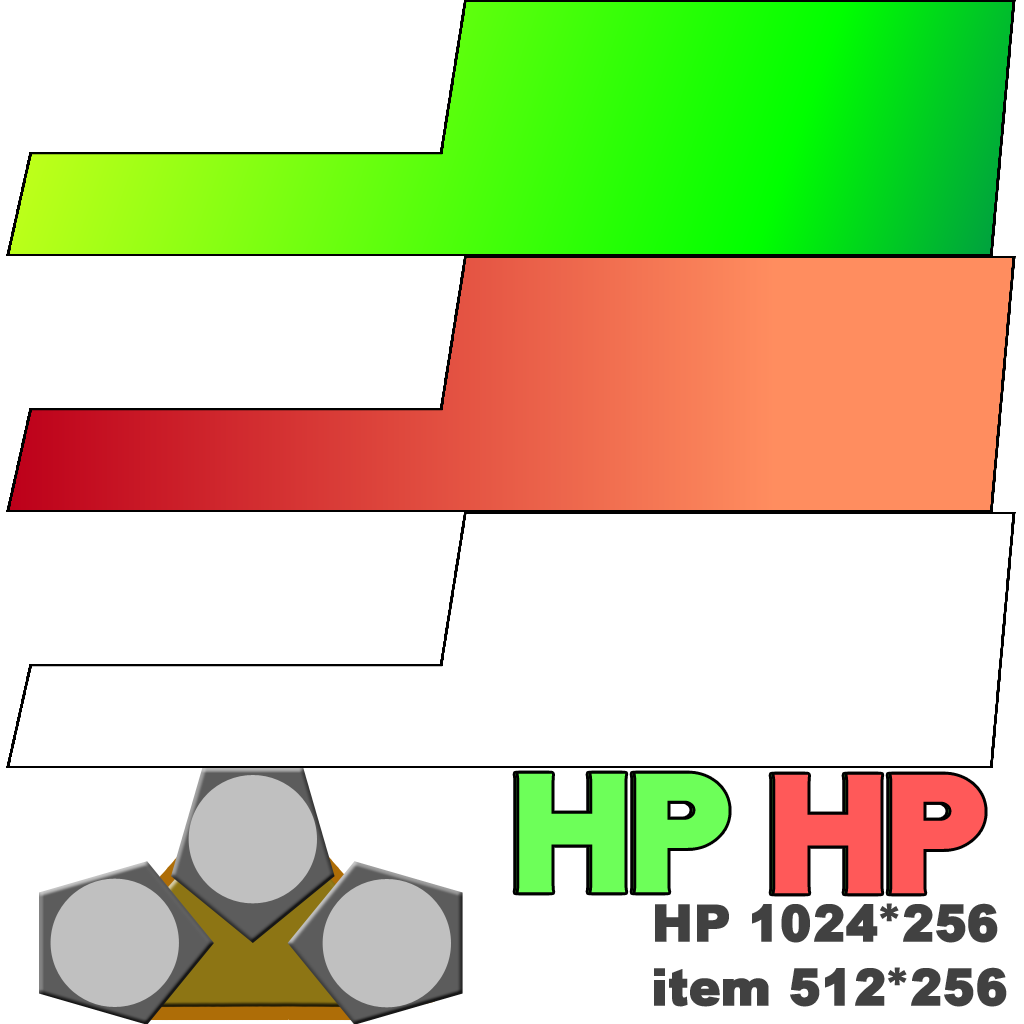
<style>
.page{position:relative;width:1024px;height:1024px;background:#ffffff}
.page>*{position:absolute;margin:0}
.t1{font:167.8px "DFGothic-UB-WING-RKSJ-H";color:#6dff59}
.t2{font:167.8px "DFGothic-UB-WING-RKSJ-H";color:#ff5959}
.t3{font:53.4px/64.1px "DHPGothic-EB-WIN-RKSJ-H";color:#414141}
</style>
<div class="page">
<p class="t1" style="left:515px;top:773px;width:211px;height:120px">HP</p>
<p class="t1" style="left:518px;top:773px;width:211px;height:120px">HP</p>
<p class="t2" style="left:771px;top:774px;width:211px;height:120px">HP</p>
<p class="t2" style="left:774px;top:774px;width:211px;height:120px">HP</p>
<p class="t3" style="left:654px;top:903px;width:353px;height:104px">HP 1024*256<br>item 512*256</p>
</div>
